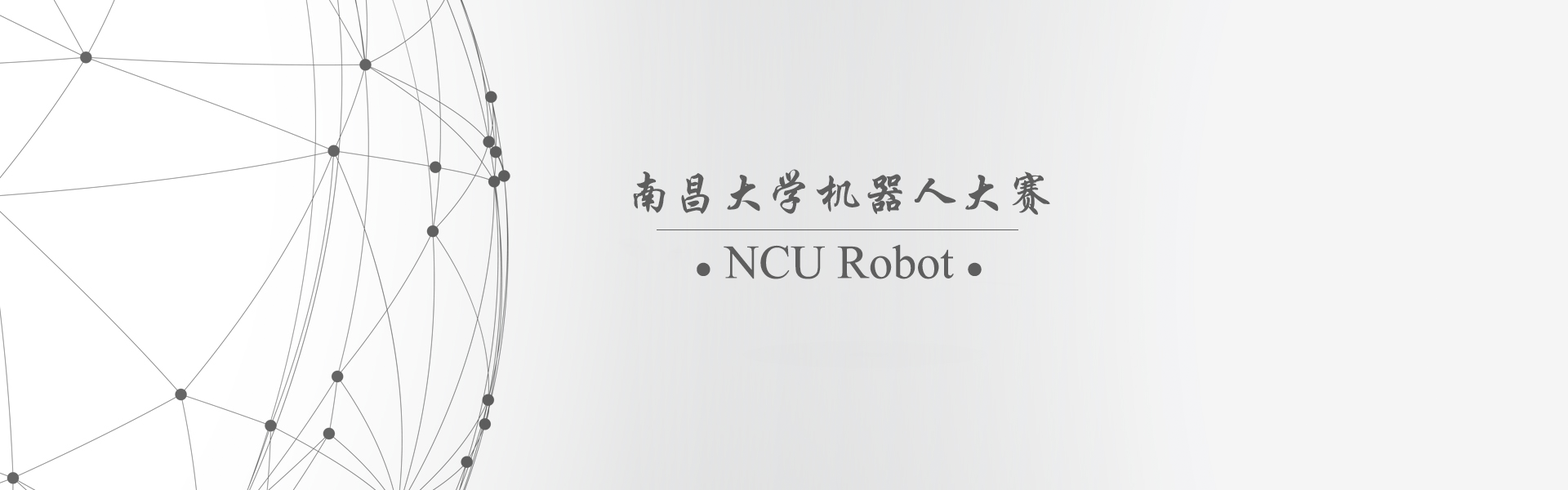
<style>
.page{position:relative;width:1568px;height:490px;background:#f5f5f5}
.page>*{position:absolute;margin:0}
.t1{font:47.6px "STXingkai";color:#5e5e5e}
.t2{font:47.6px "TimesNewRomanPSMT";color:#5e5e5e}
.t3{font:30.6px "TimesNewRomanPSMT";color:#5e5e5e}
</style>
<div class="page">
<p class="t1" style="left:633px;top:169px;width:417px;height:46px">南昌大学机器人大赛</p>
<p class="t2" style="left:697px;top:244px;width:285px;height:35px"><span class="t3">●</span> NCU Robot <span class="t3">●</span></p>
</div>
